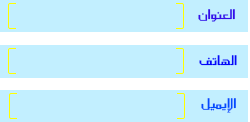
<style>
.page{position:relative;width:250px;height:122px;background:#c2efff}
.page>*{position:absolute;margin:0}
.t1{font:16px "SC_KHALID";color:#370deb}
.t2{font:16px "SC_KHALID";color:#0608fa}
.t3{font:16px "SC_KHALID";color:#034cfe}
</style>
<div class="page">
<p class="t1" style="left:198px;top:9px;width:37px;height:13px">العنوان</p>
<p class="t2" style="left:199px;top:55px;width:38px;height:11px">الهاتف</p>
<p class="t3" style="left:201px;top:98px;width:35px;height:15px">الإيميل</p>
</div>
